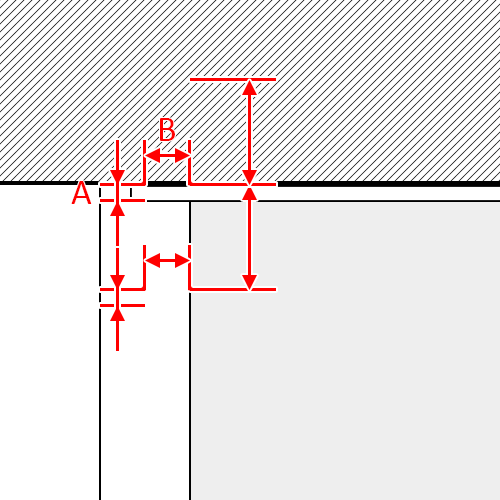
<style>
.page{position:relative;width:500px;height:500px;background:#ffffff}
.page>*{position:absolute;margin:0}
.t1{font:36px "Calibri";color:#ff0000}
</style>
<div class="page">
<p class="t1" style="left:160px;top:118px;width:15px;height:23px">B</p>
<p class="t1" style="left:71px;top:181px;width:21px;height:23px">A</p>
</div>
